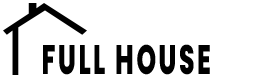
<style>
.page{position:relative;width:272px;height:78px;background:#ffffff}
.page>*{position:absolute;margin:0}
.t1{font:41px "Poppins-ExtraBold";letter-spacing:0.1em;color:#000000;scale:0.61 1}
</style>
<div class="page">
<p class="t1" style="left:43px;top:44px;width:167px;height:31px">FULL HOUSE</p>
</div>
